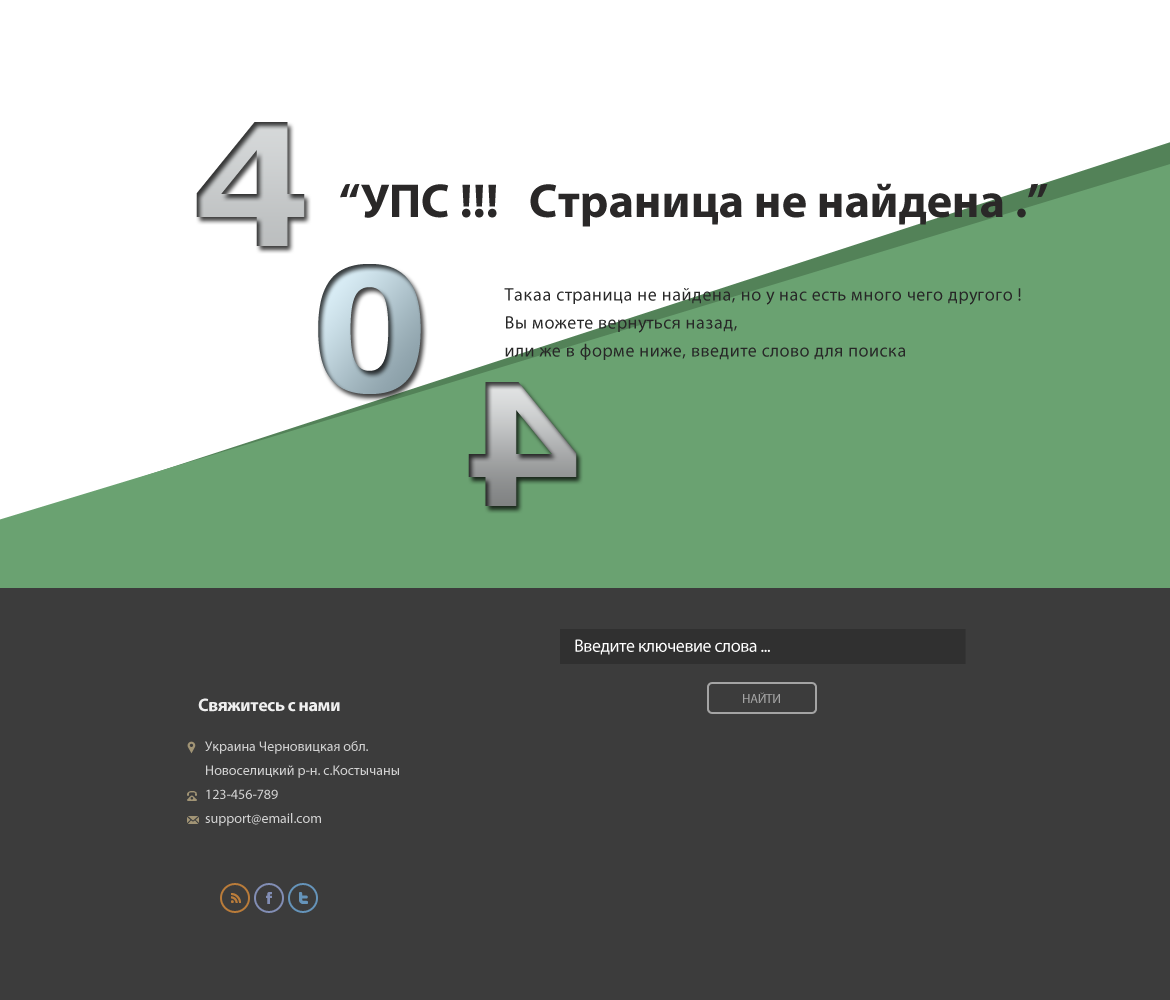
<style>
.page{position:relative;width:1170px;height:1000px;background:#3c3c3c}
.page>*{position:absolute;margin:0}
.t1{font:48px "MyriadPro-Bold";color:#2a2828}
.t2{font:18px/28px "MyriadPro-Regular";letter-spacing:0.025em;color:#272727}
.t3{font:18px "MyriadPro-Regular";letter-spacing:-0.025em;color:#ffffff}
.t4{font:18px "MyriadPro-Bold";letter-spacing:-0.025em;color:#efefef}
.t5{font:13px "MyriadPro-Regular";letter-spacing:-0.025em;color:#a4a4a4}
.t6{font:14px/24px "MyriadPro-Regular";color:#d2d2d2}
</style>
<div class="page">
<p class="t1" style="left:340px;top:183px;width:708px;height:44px">“УПС !!!   Страница не найдена .”</p>
<p class="t2" style="left:504px;top:288px;width:517px;height:72px">Такаа страница не найдена, но у нас есть много чего другого !<br>Вы можете вернуться назад, <br>или же в форме ниже, введите слово для поиска</p>
<p class="t3" style="left:575px;top:639px;width:195px;height:16px">Введите ключевие слова ...</p>
<p class="t4" style="left:198px;top:698px;width:142px;height:14px">Свяжитесь с нами</p>
<p class="t5" style="left:743px;top:692px;width:37px;height:11px">НАЙТИ</p>
<p class="t6" style="left:205px;top:741px;width:194px;height:85px">Украина Черновицкая обл. Новоселицкий р-н. с.Костычаны<br>123-456-789<br>support@email.com</p>
</div>
